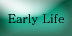
<style>
.page{position:relative;width:72px;height:36px}
.page>*{position:absolute;margin:0}
.t1{font:12px "Batang";color:#000000}
</style>
<div class="page">
<p class="t1" style="left:8px;top:14px;width:57px;height:11px">Early Life</p>
</div>
